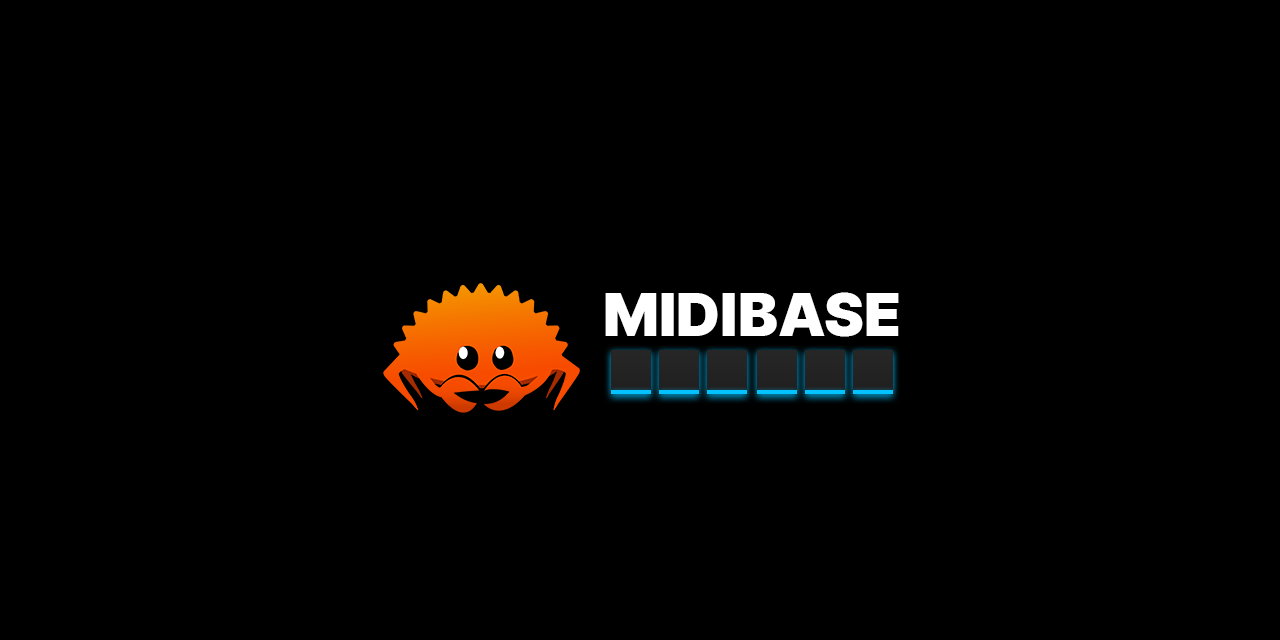
<style>
.page{position:relative;width:1280px;height:640px;background:#000000}
.page>*{position:absolute;margin:0}
.t1{font:60px "Inter-Black";color:#ffffff}
</style>
<div class="page">
<p class="t1" style="left:605px;top:292px;width:294px;height:45px">MIDIBASE</p>
</div>
